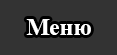
<style>
.page{position:relative;width:117px;height:55px;background:#333333}
.page>*{position:absolute;margin:0}
.t1{font:24px "TimesNewRomanPS-BoldMT";color:#ffffff}
</style>
<div class="page">
<p class="t1" style="left:26px;top:19px;width:65px;height:16px">Меню</p>
</div>
